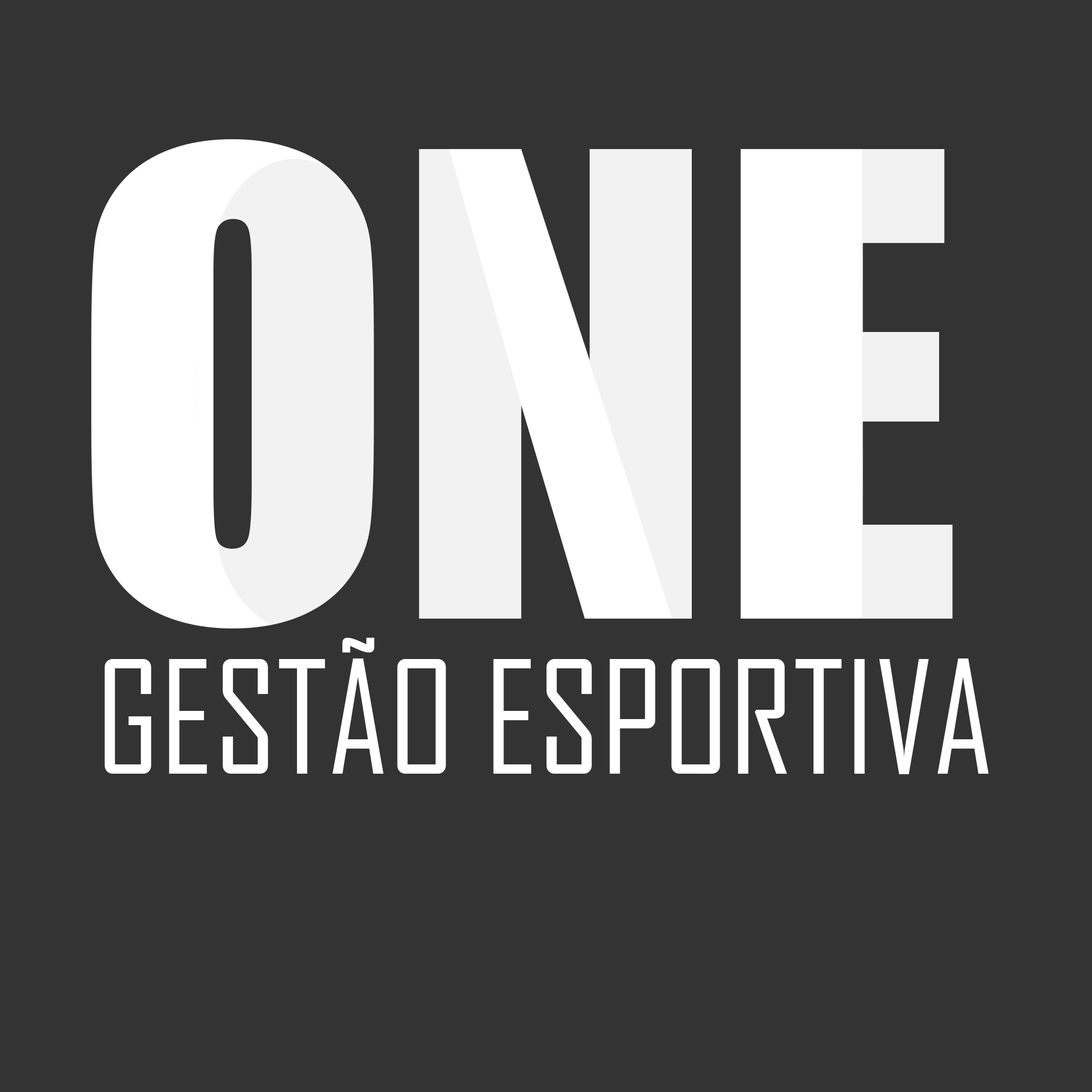
<style>
.page{position:relative;width:1092px;height:1092px;background:#333333}
.page>*{position:absolute;margin:0}
.t1{font:593.8px "Impact";color:#ffffff}
.t2{font:150.1px "AgencyFB-Reg";color:#ffffff}
</style>
<div class="page">
<p class="t1" style="left:91px;top:139px;width:862px;height:489px">ONE</p>
<p class="t2" style="left:104px;top:638px;width:885px;height:136px">GESTÃO ESPORTIVA</p>
</div>
